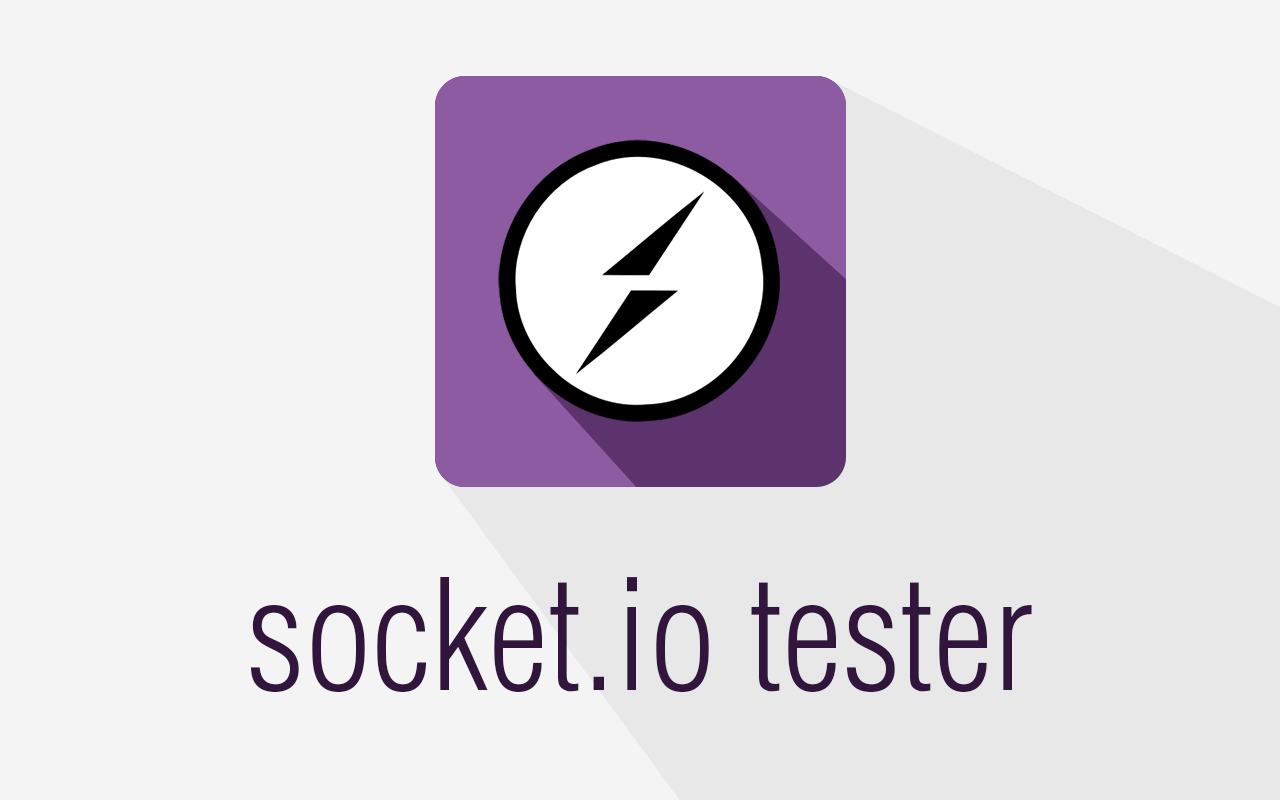
<style>
.page{position:relative;width:1280px;height:800px;background:#f4f4f4}
.page>*{position:absolute;margin:0}
.t1{font:151px "HelveticaLTStd-LightCond";color:#31153c}
</style>
<div class="page">
<p class="t1" style="left:251px;top:577px;width:781px;height:115px">socket.io tester</p>
</div>
